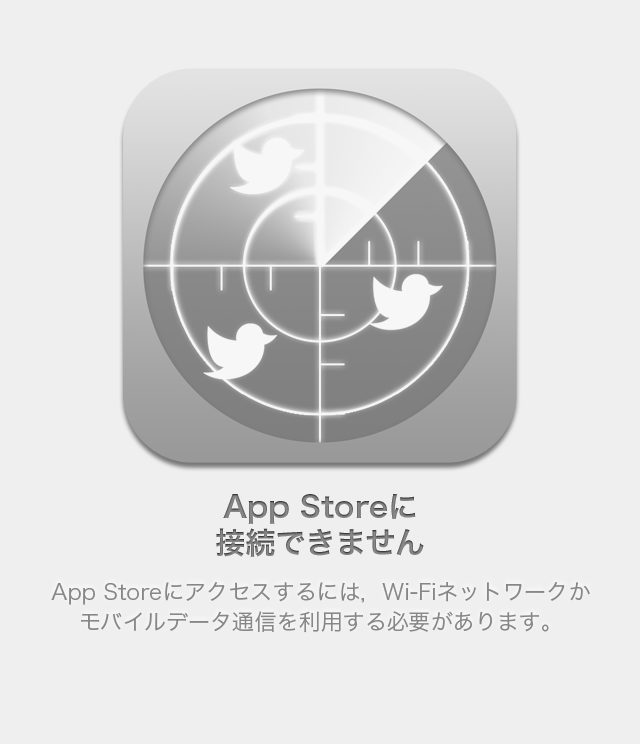
<style>
.page{position:relative;width:640px;height:744px;background:#efefef}
.page>*{position:absolute;margin:0}
.t1{font:30px/36px "HiraKakuProN-W6";color:#878787}
.t2{font:22px/30px "HiraKakuProN-W3";color:#878787}
</style>
<div class="page">
<p class="t1" style="left:216px;top:494px;width:208px;height:63px;text-align:center">App Storeに<br>接続できません</p>
<p class="t2" style="left:51px;top:582px;width:539px;height:51px;text-align:center">App Storeにアクセスするには，Wi-Fiネットワークか<br>モバイルデータ通信を利用する必要があります。</p>
</div>
